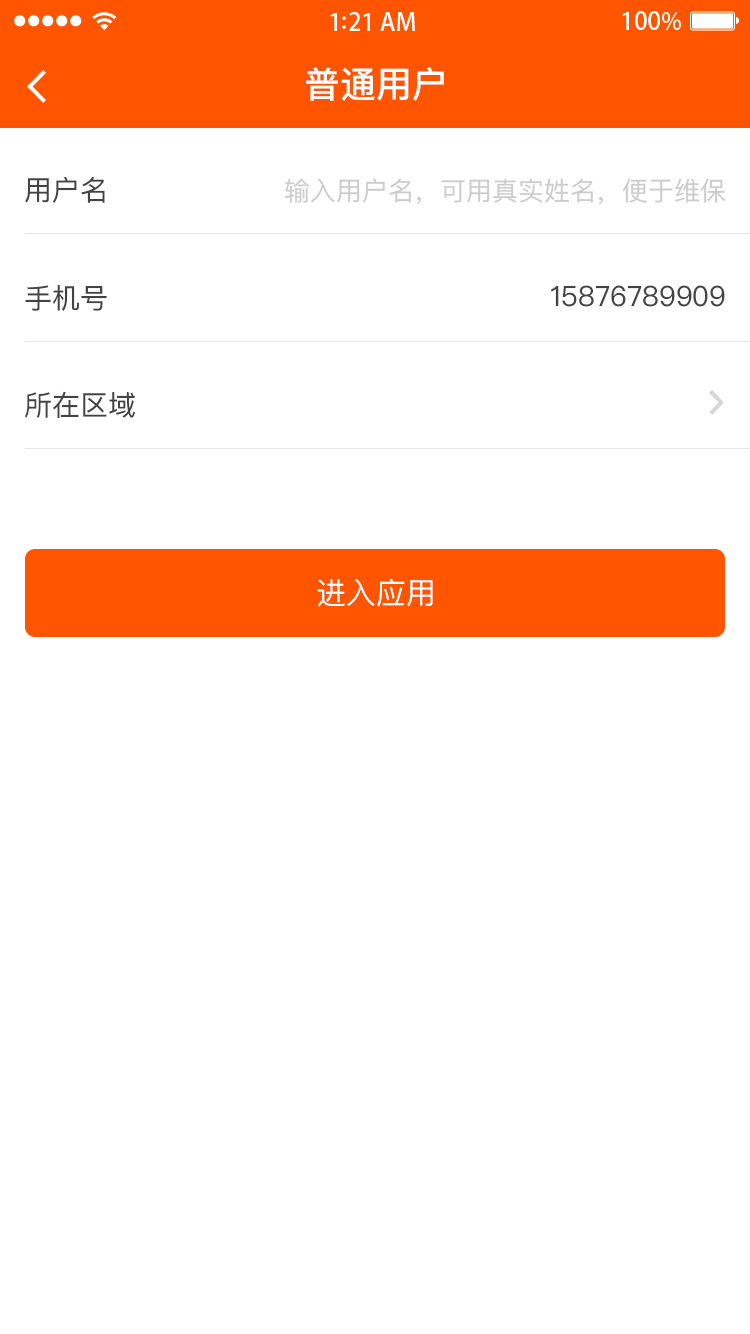
<style>
.page{position:relative;width:750px;height:1334px;background:#ffffff}
.page>*{position:absolute;margin:0}
.t1{font:36px "PingFangSC-Medium";color:#ffffff}
.t2{font:28px "PingFangSC-Regular";color:#434343}
.t3{font:26px "PingFangSC-Regular";color:#cccccc}
.t4{font:30px "PingFangSC-Regular";color:#ffffff;text-transform:uppercase}
</style>
<div class="page">
<p class="t1" style="left:306px;top:67px;width:138px;height:34px">普通用户</p>
<p class="t2" style="left:25px;top:177px;width:80px;height:26px">用户名</p>
<p class="t3" style="left:285px;top:178px;width:440px;height:27px">输入用户名，可用真实姓名，便于维保</p>
<p class="t2" style="left:25px;top:285px;width:82px;height:26px">手机号</p>
<p class="t2" style="left:551px;top:285px;width:174px;height:22px">15876789909</p>
<p class="t2" style="left:25px;top:391px;width:110px;height:27px">所在区域</p>
<p class="t4" style="left:317px;top:578px;width:116px;height:29px">进入应用</p>
</div>
